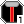
<style>
.page{position:relative;width:24px;height:24px;background:#000000}
.page>*{position:absolute;margin:0}
.t1{font:9px "Montserrat-Bold";color:#000000}
</style>
<div class="page">
<p class="t1" style="left:19px;top:16px;width:3px;height:7px">1</p>
</div>
